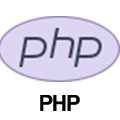
<style>
.page{position:relative;width:120px;height:120px;background:#ffffff}
.page>*{position:absolute;margin:0}
.t1{font:24px "FranklinGothic-Medium";letter-spacing:-0.05em;color:#000000}
</style>
<div class="page">
<p class="t1" style="left:40px;top:95px;width:40px;height:16px">PHP</p>
</div>
